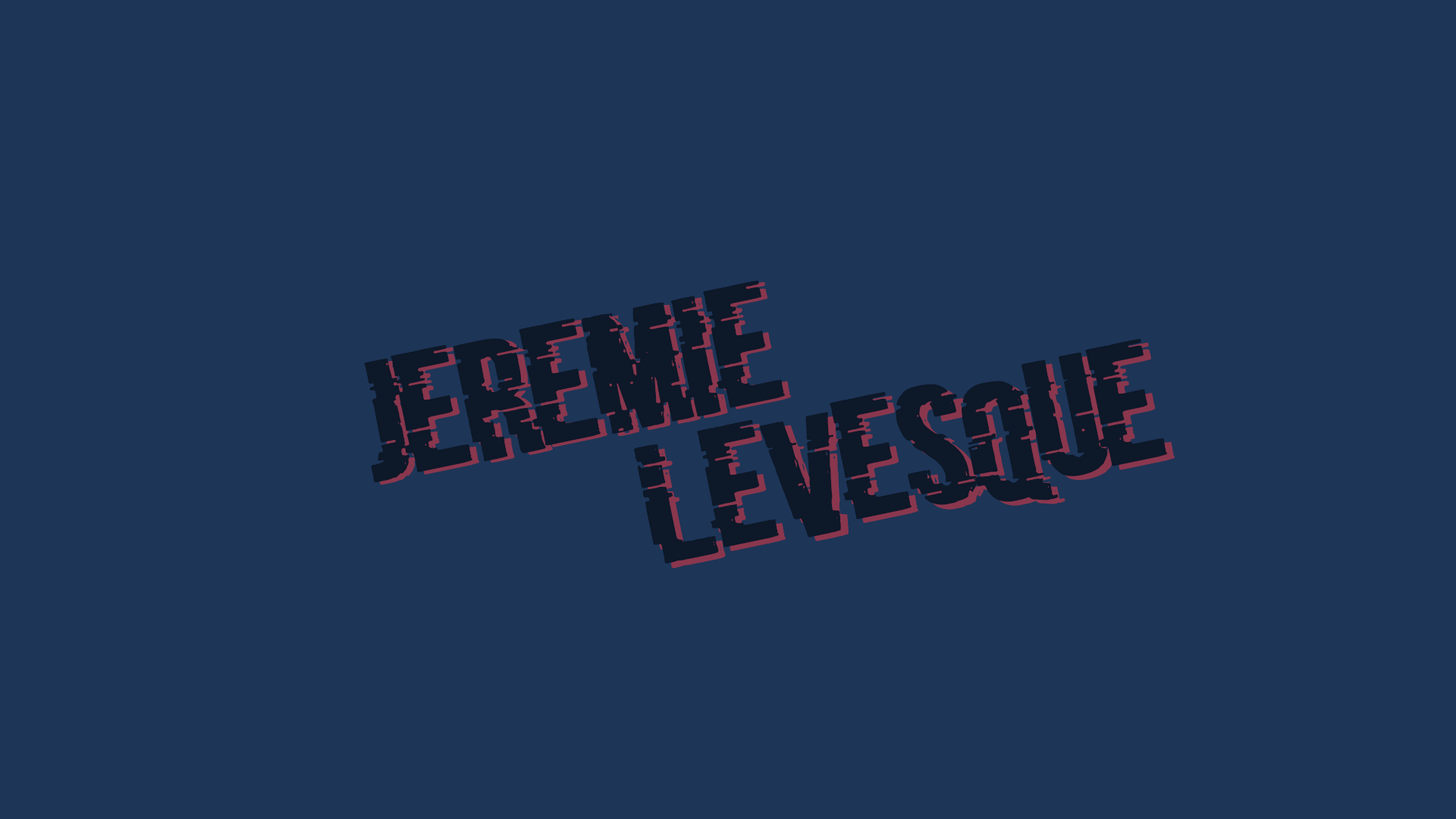
<style>
.page{position:relative;width:1456px;height:819px;background:#1d3557}
.page>*{position:absolute;margin:0}
.t1{font:158px "BadSignal";color:#0d1828}
</style>
<div class="page">
<p class="t1" style="left:364px;top:280px;width:421px;height:203px;rotate:-12deg">JÉRÉMIE</p>
<p class="t1" style="left:370px;top:281px;width:421px;height:204px;rotate:-12deg">JÉRÉMIE</p>
<p class="t1" style="left:633px;top:338px;width:534px;height:226px;rotate:-12deg">Levesque</p>
<p class="t1" style="left:640px;top:342px;width:535px;height:227px;rotate:-12deg">Levesque</p>
</div>
